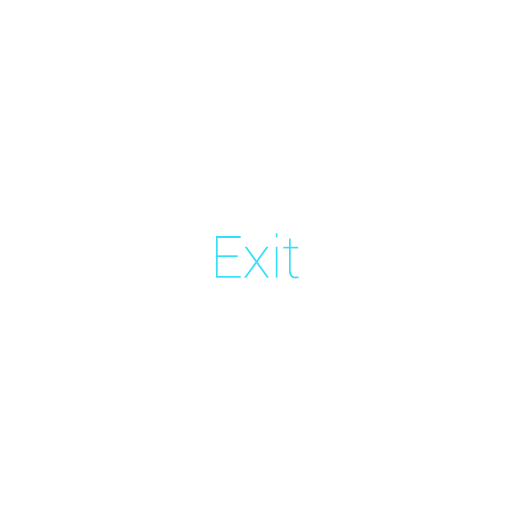
<style>
.page{position:relative;width:512px;height:512px;background:#ffffff}
.page>*{position:absolute;margin:0}
.t1{font:58.3px "Roboto-Thin";color:#33dff9}
</style>
<div class="page">
<p class="t1" style="left:216px;top:233px;width:83px;height:46px">Exit</p>
</div>
